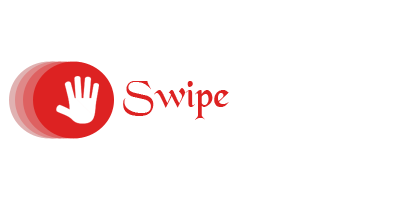
<style>
.page{position:relative;width:400px;height:200px;background:#ffffff}
.page>*{position:absolute;margin:0}
.t1{font:40px "BlackChancery";color:#dd2222}
</style>
<div class="page">
<p class="t1" style="left:123px;top:81px;width:106px;height:39px">Swipe</p>
</div>
